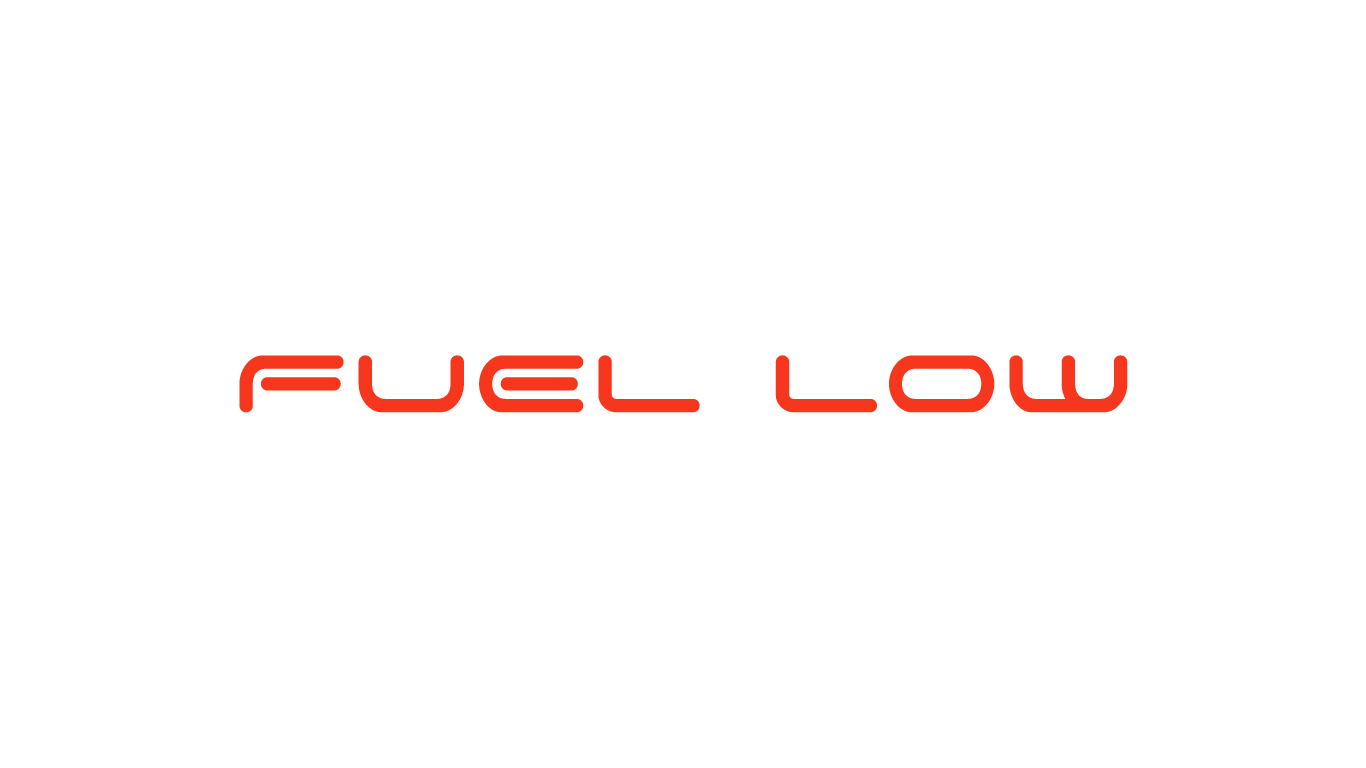
<style>
.page{position:relative;width:1366px;height:768px;background:#ffffff}
.page>*{position:absolute;margin:0}
.t1{font:128px "SpaceAge";color:#f6371e;font-weight:bold}
</style>
<div class="page">
<p class="t1" style="left:239px;top:355px;width:889px;height:58px">FUEL Low</p>
</div>
